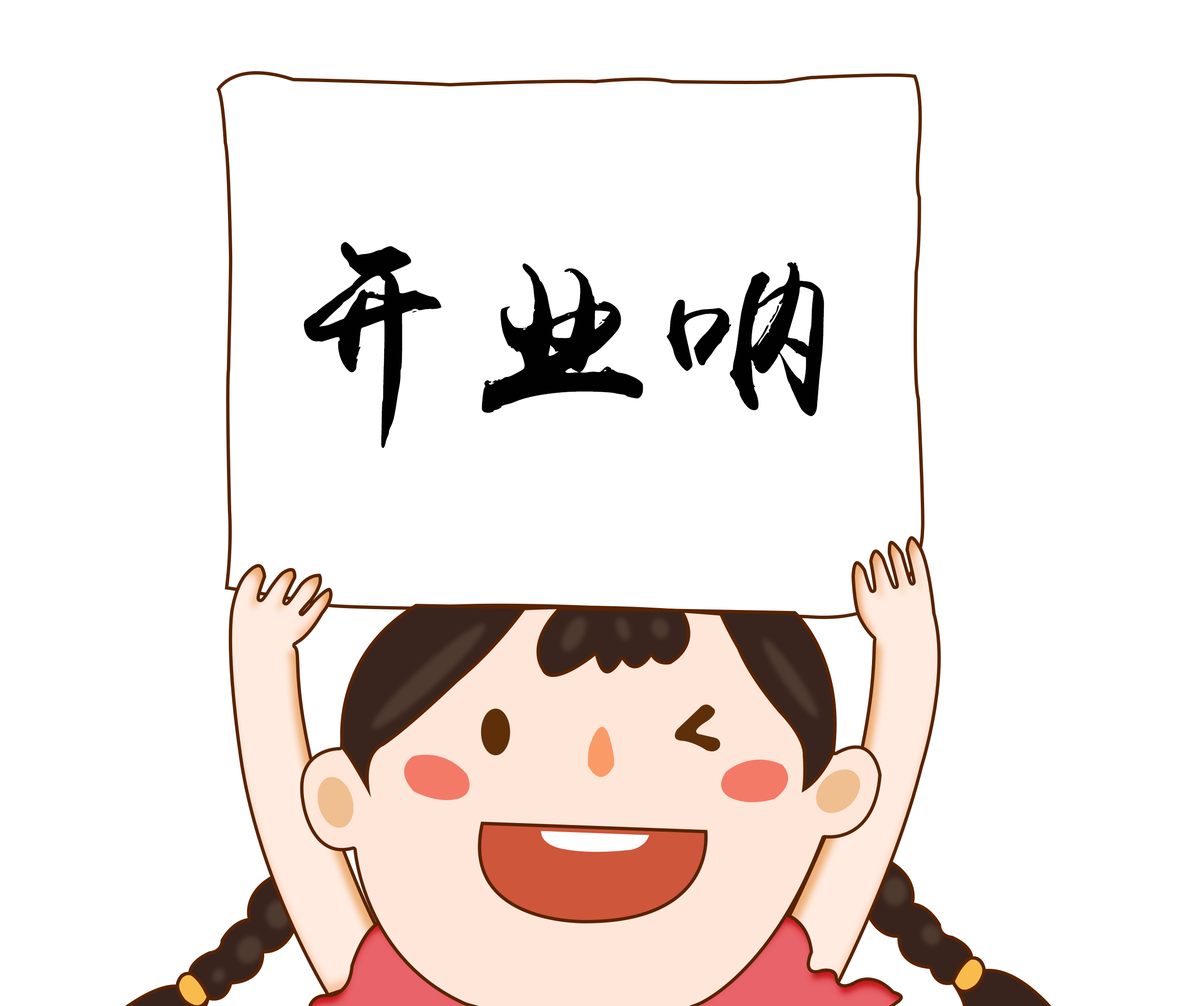
<style>
.page{position:relative;width:1185px;height:1006px;background:#ffffff}
.page>*{position:absolute;margin:0}
.t1{font:193.1px "yuweij";letter-spacing:-0.02em;color:#020101;text-transform:uppercase}
</style>
<div class="page">
<p class="t1" style="left:304px;top:242px;width:520px;height:206px">开业呐</p>
</div>
